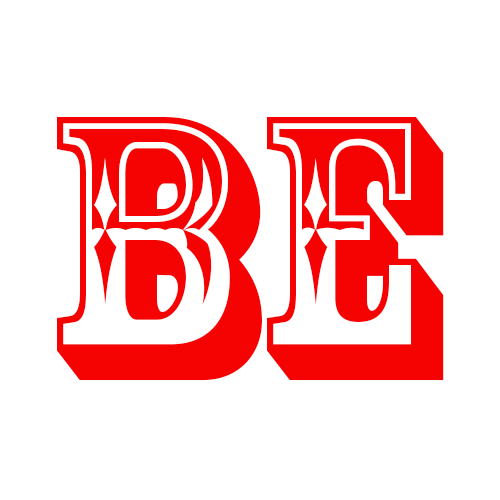
<style>
.page{position:relative;width:500px;height:500px;background:#ffffff}
.page>*{position:absolute;margin:0}
.t1{font:350px "RosewoodStd-Regular";color:#f50202}
</style>
<div class="page">
<p class="t1" style="left:57px;top:117px;width:387px;height:264px">BE</p>
</div>
